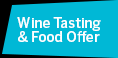
<style>
.page{position:relative;width:118px;height:58px;background:#00b8d6}
.page>*{position:absolute;margin:0}
.t1{font:14px/14px "BentonSans-Medium";letter-spacing:-0.01em;color:#ffffff}
</style>
<div class="page">
<p class="t1" style="left:17px;top:17px;width:84px;height:25px">Wine Tasting<br>&amp; Food Offer</p>
</div>
